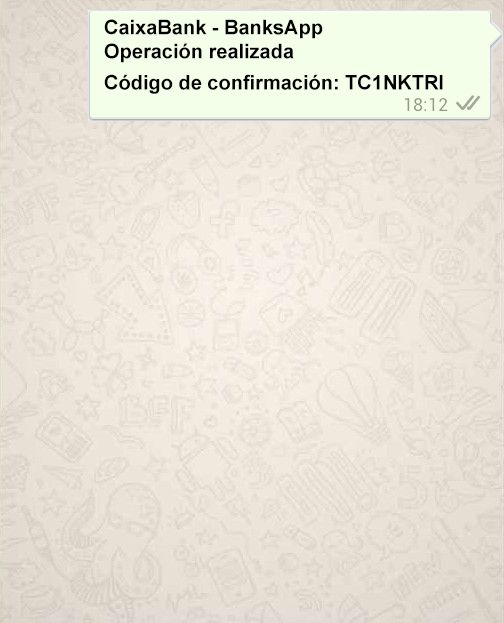
<style>
.page{position:relative;width:504px;height:623px}
.page>*{position:absolute;margin:0}
.t1{font:20px "Arial-BoldMT";color:#000000}
</style>
<div class="page">
<p class="t1" style="left:104px;top:19px;width:339px;height:75px">CaixaBank - BanksApp<br>Operación realizada<br><br>Código de confirmación: TC1NKTRI</p>
</div>
